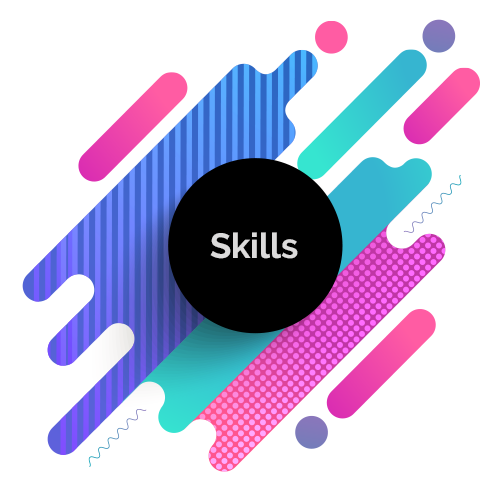
<style>
.page{position:relative;width:500px;height:500px;background:#ffffff}
.page>*{position:absolute;margin:0}
.t1{font:34.9px "Raleway-Bold";color:#dcdbdb}
</style>
<div class="page">
<p class="t1" style="left:210px;top:232px;width:88px;height:27px">Skills</p>
</div>
